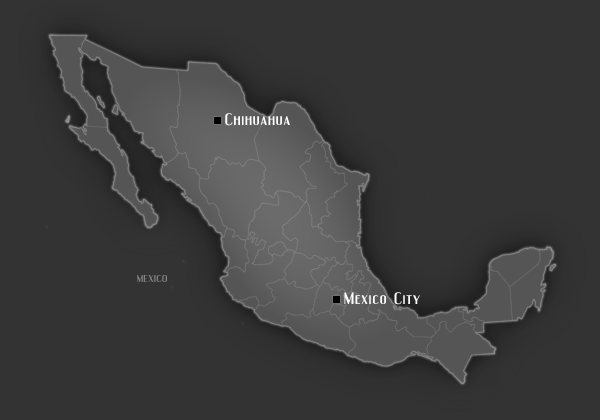
<style>
.page{position:relative;width:600px;height:420px;background:#333333}
.page>*{position:absolute;margin:0}
.t1{font:14.4px "Engebrechtre";letter-spacing:0.05em;color:#ffffff;scale:1.25 1}
.t2{font:8.8px "Engebrechtre";letter-spacing:0.05em;color:#838383;scale:1.25 1}
</style>
<div class="page">
<p class="t1" style="left:225px;top:113px;width:65px;height:13px">Chihuahua</p>
<p class="t2" style="left:137px;top:275px;width:30px;height:7px">MEXICO</p>
<p class="t1" style="left:344px;top:292px;width:76px;height:13px">Mexico City</p>
</div>
